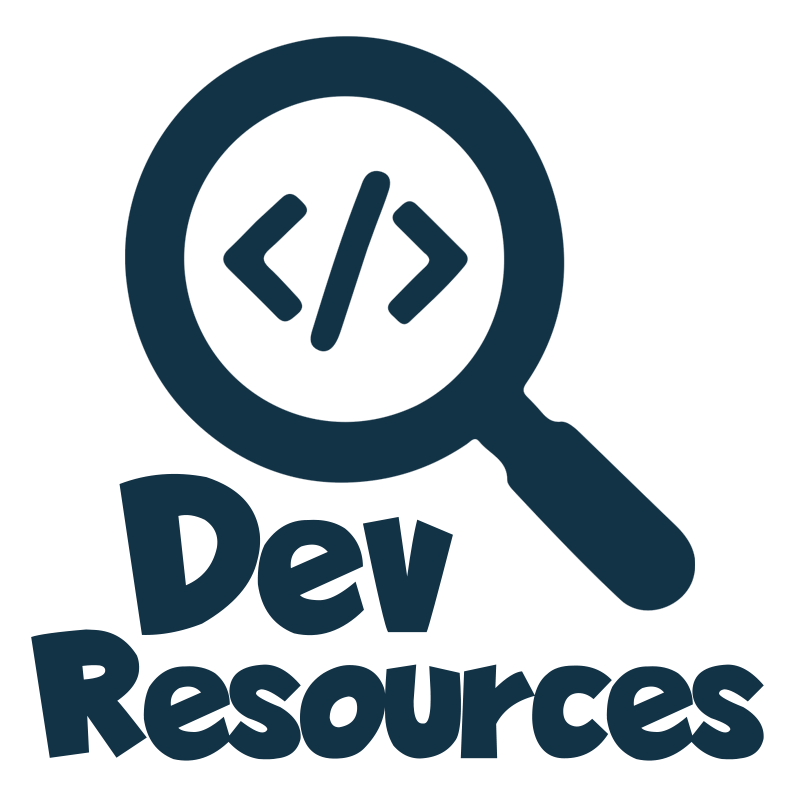
<style>
.page{position:relative;width:795px;height:795px;background:#ffffff}
.page>*{position:absolute;margin:0}
.t1{font:225px "LapsusPro-Bold";color:#123245}
.t2{font:183.8px "LapsusPro-Bold";color:#123245}
</style>
<div class="page">
<p class="t1" style="left:119px;top:473px;width:334px;height:163px">Dev</p>
<p class="t2" style="left:31px;top:629px;width:733px;height:132px">Resources</p>
</div>
